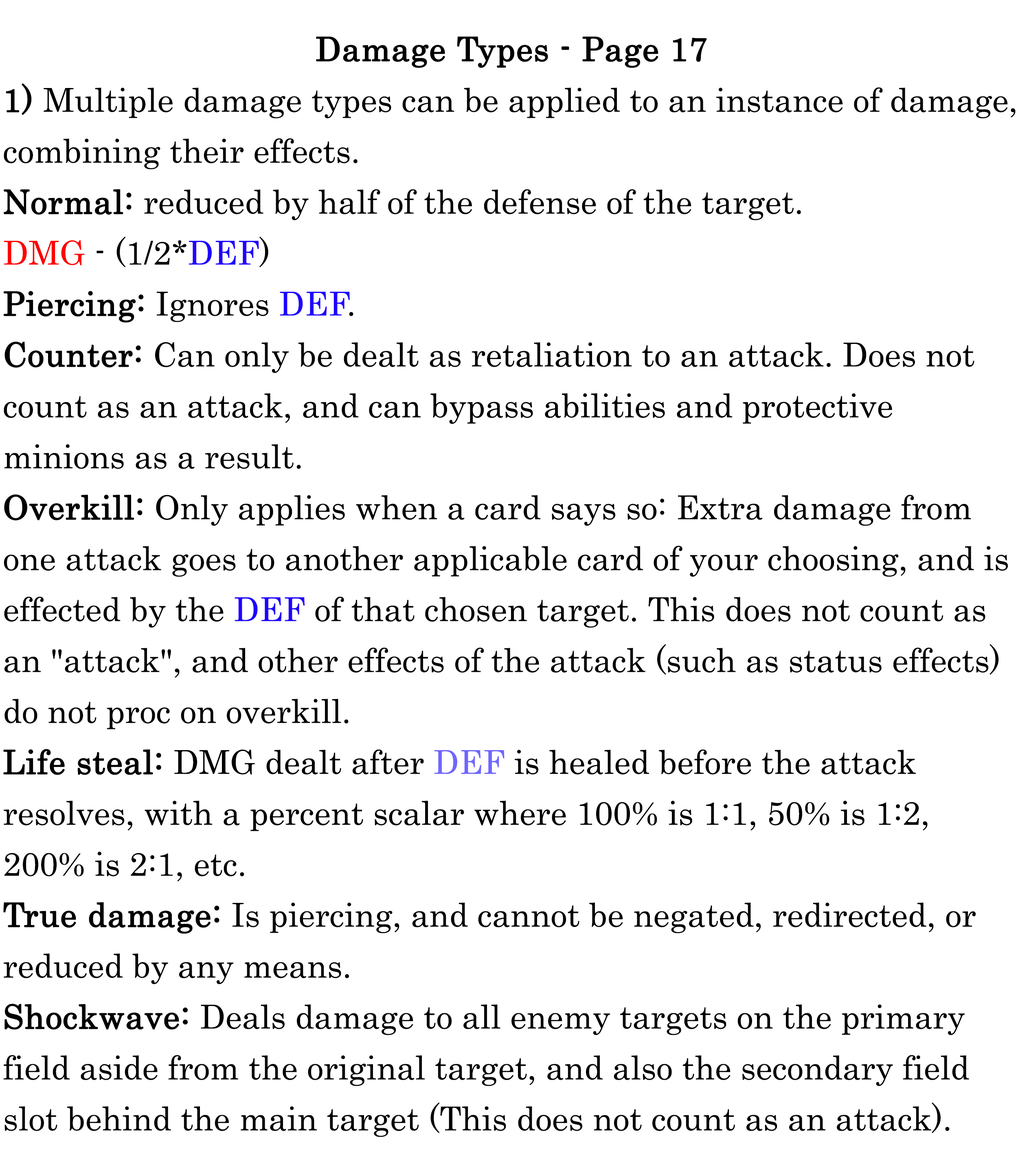
<style>
.page{position:relative;width:1018px;height:1171px;background:#ffffff}
.page>*{position:absolute;margin:0}
.t1{font:56.6px/50.9px "Century";color:#000000}
.t2{font:56.6px/50.9px "Century";color:#000000;font-weight:bold}
.t3{font:56.6px/50.9px "Century";color:#ff0000}
.t4{font:56.6px/50.9px "Century";color:#1e00ff}
.t5{font:56.6px/50.9px "Century";color:#7066ff}
</style>
<div class="page">
<p class="t1" style="left:3px;top:36px;width:1013px;height:1101px;text-align:center"><span class="t2">Damage Types - Page 17<br>1)</span> Multiple damage types can be applied to an instance of damage, combining their effects.<br><span class="t2">Normal:</span> reduced by half of the defense of the target. <br><span class="t3">DMG</span> - (1/2*<span class="t4">DEF</span>)<br><span class="t2">Piercing:</span> Ignores <span class="t4">DEF</span>.<br><span class="t2">Counter:</span> Can only be dealt as retaliation to an attack. Does not count as an attack, and can bypass abilities and protective minions as a result.<br><span class="t2">Overkill:</span> Only applies when a card says so: Extra damage from one attack goes to another applicable card of your choosing, and is effected by the <span class="t4">DEF</span> of that chosen target. This does not count as an "attack", and other effects of the attack (such as status effects) do not proc on overkill.<br><span class="t2">Life steal:</span> DMG dealt after <span class="t5">DEF</span> is healed before the attack resolves, with a percent scalar where 100% is 1:1, 50% is 1:2, 200% is 2:1, etc.<br><span class="t2">True damage:</span> Is piercing, and cannot be negated, redirected, or reduced by any means.<br><span class="t2">Shockwave:</span> Deals damage to all enemy targets on the primary field aside from the original target, and also the secondary field slot behind the main target (This does not count as an attack).</p>
</div>
